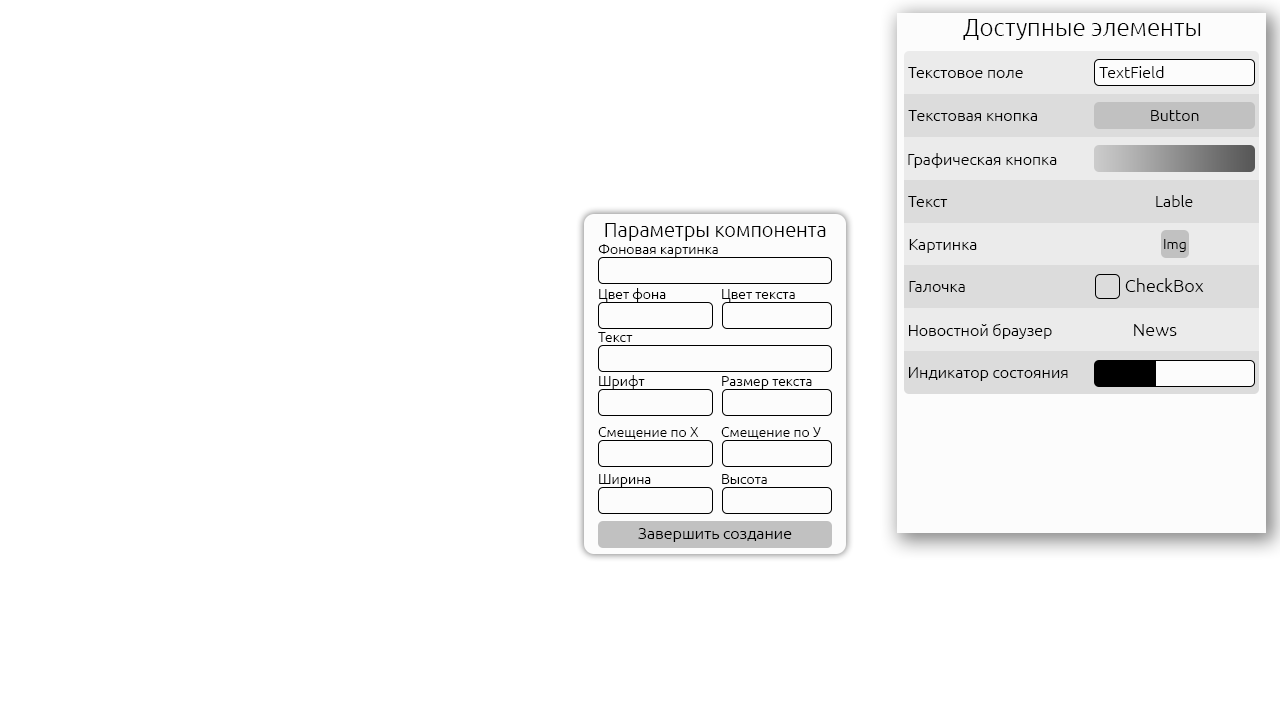
<style>
.page{position:relative;width:1280px;height:720px;background:#ffffff}
.page>*{position:absolute;margin:0}
.t1{font:24px "Ubuntu-Light";color:#000000}
.t2{font:16px "Ubuntu-Light";color:#000000}
.t3{font:20px "Ubuntu-Light";color:#000000}
.t4{font:14px "Ubuntu-Light";color:#000000}
.t5{font:18px "Ubuntu-Light";color:#000000}
</style>
<div class="page">
<p class="t1" style="left:963px;top:19px;width:238px;height:21px">Доступные элементы</p>
<p class="t2" style="left:908px;top:67px;width:115px;height:11px">Текстовое поле</p>
<p class="t2" style="left:1099px;top:66px;width:65px;height:12px">TextField</p>
<p class="t2" style="left:908px;top:110px;width:129px;height:11px">Текстовая кнопка</p>
<p class="t2" style="left:1151px;top:110px;width:48px;height:11px">Button</p>
<p class="t2" style="left:908px;top:153px;width:149px;height:15px">Графическая кнопка</p>
<p class="t2" style="left:908px;top:196px;width:40px;height:11px">Текст</p>
<p class="t2" style="left:1156px;top:195px;width:37px;height:12px">Lable</p>
<p class="t3" style="left:605px;top:223px;width:221px;height:18px">Параметры компонента</p>
<p class="t4" style="left:598px;top:244px;width:120px;height:13px">Фоновая картинка</p>
<p class="t2" style="left:909px;top:239px;width:68px;height:14px">Картинка</p>
<p class="t4" style="left:1164px;top:239px;width:22px;height:13px">Img</p>
<p class="t2" style="left:909px;top:281px;width:56px;height:11px">Галочка</p>
<p class="t5" style="left:1125px;top:278px;width:79px;height:14px">CheckBox</p>
<p class="t4" style="left:599px;top:288px;width:67px;height:14px">Цвет фона</p>
<p class="t4" style="left:722px;top:289px;width:73px;height:13px">Цвет текста</p>
<p class="t2" style="left:909px;top:324px;width:143px;height:15px">Новостной браузер</p>
<p class="t5" style="left:1134px;top:324px;width:43px;height:12px">News</p>
<p class="t4" style="left:598px;top:332px;width:35px;height:10px">Текст</p>
<p class="t4" style="left:599px;top:375px;width:46px;height:14px">Шрифт</p>
<p class="t4" style="left:722px;top:376px;width:90px;height:13px">Размер текста</p>
<p class="t2" style="left:909px;top:367px;width:159px;height:14px">Индикатор состояния</p>
<p class="t4" style="left:598px;top:427px;width:101px;height:12px">Смещение по Х</p>
<p class="t4" style="left:721px;top:427px;width:100px;height:12px">Смещение по У</p>
<p class="t4" style="left:599px;top:474px;width:52px;height:13px">Ширина</p>
<p class="t4" style="left:722px;top:474px;width:45px;height:10px">Высота</p>
<p class="t2" style="left:638px;top:528px;width:154px;height:14px">Завершить создание</p>
</div>
